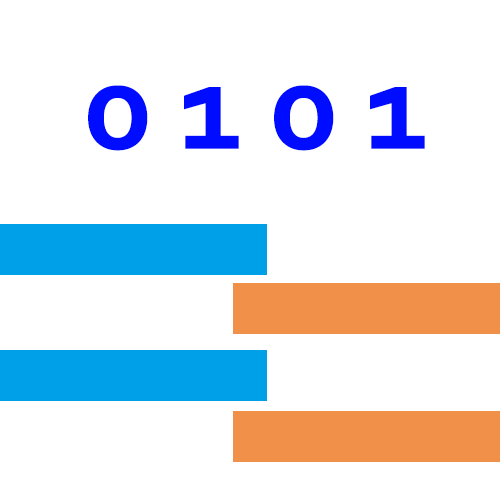
<style>
.page{position:relative;width:500px;height:500px;background:#ffffff}
.page>*{position:absolute;margin:0}
.t1{font:130.3px "Corbel-Bold";color:#000cff}
</style>
<div class="page">
<p class="t1" style="left:88px;top:85px;width:337px;height:66px">0 1 0 1</p>
</div>
